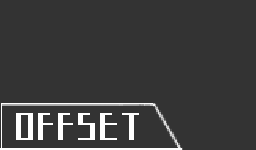
<style>
.page{position:relative;width:256px;height:150px;background:#333333}
.page>*{position:absolute;margin:0}
.t1{font:36px "Starcadia";color:#ffffff}
</style>
<div class="page">
<p class="t1" style="left:16px;top:113px;width:123px;height:27px">OFFSET</p>
</div>
